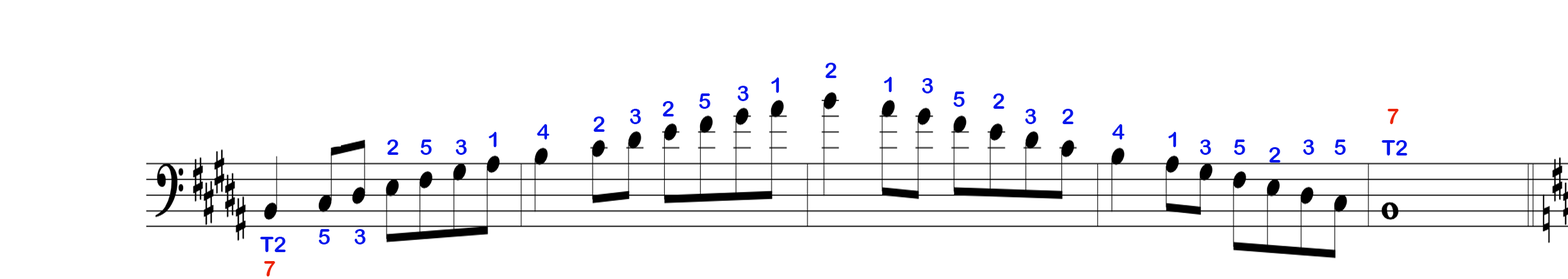
<style>
.page{position:relative;width:1568px;height:279px;background:#ffffff}
.page>*{position:absolute;margin:0}
.t1{font:21.8px "ArialRoundedMTBold";color:#0417ec}
.t2{font:21.8px "ArialRoundedMTBold";color:#ec2404}
</style>
<div class="page">
<p class="t1" style="left:825px;top:63px;width:12px;height:15px">2</p>
<p class="t1" style="left:771px;top:78px;width:9px;height:15px">1</p>
<p class="t1" style="left:884px;top:77px;width:8px;height:15px">1</p>
<p class="t1" style="left:737px;top:86px;width:12px;height:15px">3</p>
<p class="t1" style="left:922px;top:78px;width:11px;height:16px">3</p>
<p class="t1" style="left:662px;top:101px;width:12px;height:16px">2</p>
<p class="t1" style="left:699px;top:94px;width:11px;height:15px">5</p>
<p class="t1" style="left:953px;top:92px;width:12px;height:15px">5</p>
<p class="t1" style="left:993px;top:94px;width:11px;height:15px">2</p>
<p class="t1" style="left:630px;top:109px;width:11px;height:15px">3</p>
<p class="t1" style="left:1025px;top:109px;width:11px;height:15px">3</p>
<p class="t1" style="left:1062px;top:109px;width:12px;height:15px">2</p>
<p class="t2" style="left:1387px;top:109px;width:12px;height:15px">7</p>
<p class="t1" style="left:537px;top:124px;width:13px;height:16px">4</p>
<p class="t1" style="left:593px;top:117px;width:12px;height:15px">2</p>
<p class="t1" style="left:1112px;top:124px;width:13px;height:16px">4</p>
<p class="t1" style="left:489px;top:132px;width:8px;height:15px">1</p>
<p class="t1" style="left:1168px;top:132px;width:9px;height:15px">1</p>
<p class="t1" style="left:387px;top:140px;width:11px;height:15px">2</p>
<p class="t1" style="left:420px;top:140px;width:12px;height:15px">5</p>
<p class="t1" style="left:455px;top:140px;width:12px;height:15px">3</p>
<p class="t1" style="left:1200px;top:140px;width:11px;height:15px">3</p>
<p class="t1" style="left:1234px;top:140px;width:11px;height:15px">5</p>
<p class="t1" style="left:1269px;top:147px;width:11px;height:16px">2</p>
<p class="t1" style="left:1303px;top:140px;width:11px;height:15px">3</p>
<p class="t1" style="left:1334px;top:140px;width:12px;height:15px">5</p>
<p class="t1" style="left:1382px;top:140px;width:25px;height:16px">T2</p>
<p class="t1" style="left:318px;top:229px;width:12px;height:16px">5</p>
<p class="t1" style="left:354px;top:229px;width:12px;height:16px">3</p>
<p class="t1" style="left:260px;top:237px;width:26px;height:15px">T2</p>
<p class="t2" style="left:264px;top:261px;width:11px;height:16px">7</p>
</div>
